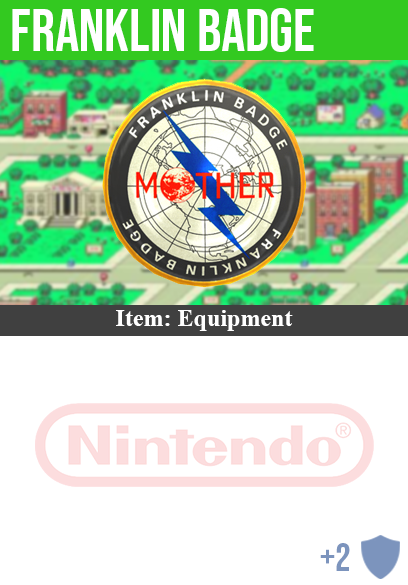
<style>
.page{position:relative;width:408px;height:585px;background:#ffffff}
.page>*{position:absolute;margin:0}
.t1{font:60px "BebasNeue-Regular";color:#ffffff}
.t2{font:24px "TimesNewRomanPS-BoldMT";color:#ffffff}
.t3{font:40px "BebasNeue-Regular";color:#7c94bd}
</style>
<div class="page">
<p class="t1" style="left:12px;top:8px;width:302px;height:44px">franklin badge</p>
<p class="t2" style="left:116px;top:310px;width:177px;height:21px">Item: Equipment</p>
<p class="t3" style="left:320px;top:543px;width:30px;height:28px">+2</p>
</div>
